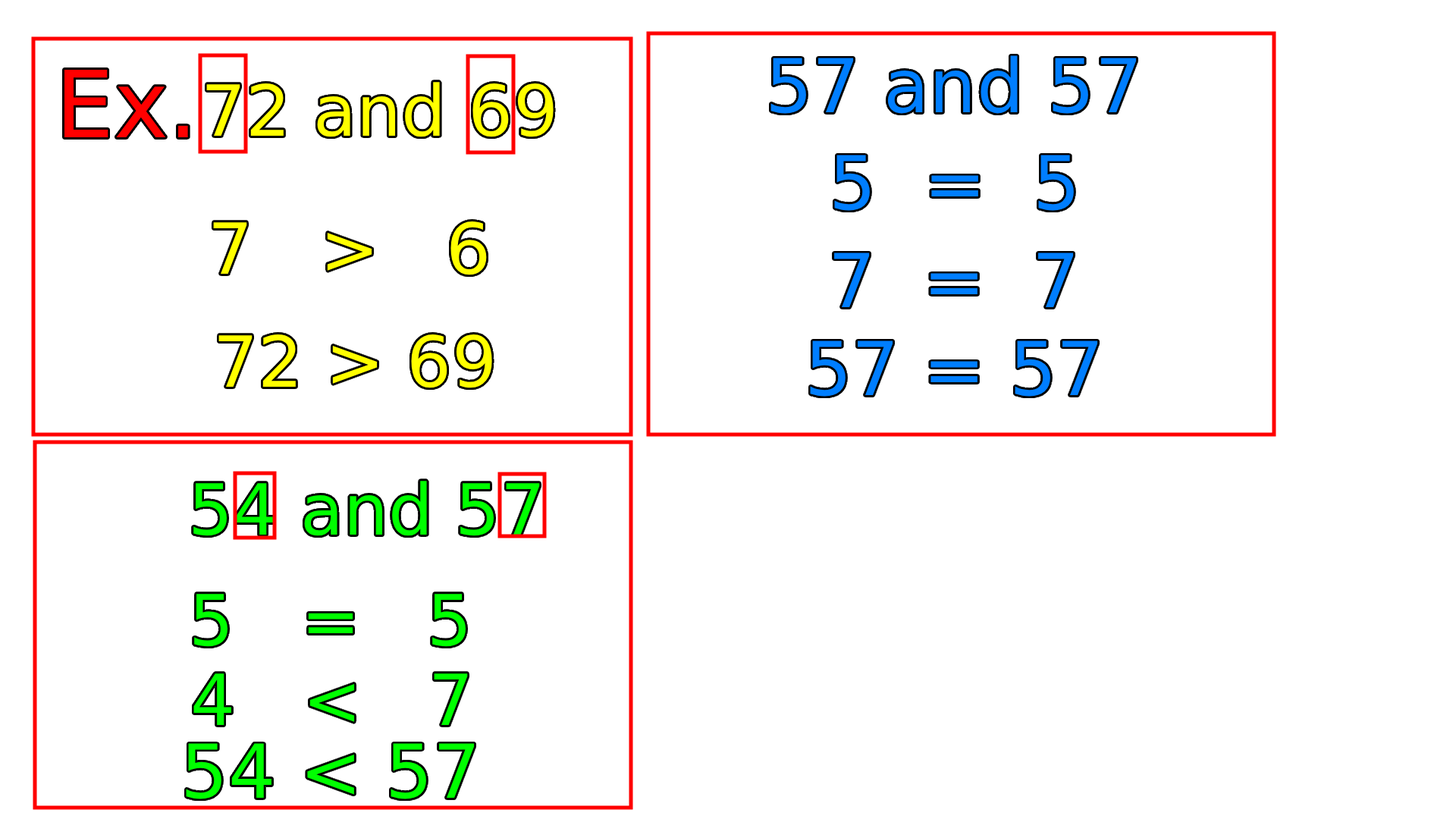
<style>
.page{position:relative;width:1456px;height:819px;background:#ffffff}
.page>*{position:absolute;margin:0}
.t1{font:74.5px "DejaVuSans";color:#007eff}
.t2{font:92.5px "DejaVuSans";color:#ff0000}
.t3{font:70.5px "DejaVuSans";color:#ffff00}
.t4{font:70.5px "DejaVuSans";color:#00ff00}
.t5{font:74.5px "DejaVuSans";color:#00ff00}
</style>
<div class="page">
<p class="t1" style="left:770px;top:55px;width:367px;height:59px">57 and 57</p>
<p class="t2" style="left:64px;top:70px;width:124px;height:67px">Ex.</p>
<p class="t3" style="left:206px;top:82px;width:348px;height:55px">72 and 69</p>
<p class="t1" style="left:834px;top:155px;width:240px;height:56px">5  =  5</p>
<p class="t3" style="left:213px;top:221px;width:274px;height:54px">7   &gt;   6</p>
<p class="t1" style="left:834px;top:253px;width:240px;height:54px">7  =  7</p>
<p class="t3" style="left:218px;top:334px;width:274px;height:54px">72 &gt; 69</p>
<p class="t1" style="left:810px;top:340px;width:288px;height:57px">57 = 57</p>
<p class="t4" style="left:193px;top:481px;width:347px;height:55px">54 and 57</p>
<p class="t4" style="left:194px;top:594px;width:272px;height:53px">5   =   5</p>
<p class="t4" style="left:193px;top:673px;width:275px;height:52px">4   &lt;   7</p>
<p class="t5" style="left:186px;top:743px;width:289px;height:56px">54 &lt; 57</p>
</div>
